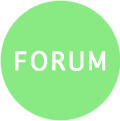
<style>
.page{position:relative;width:120px;height:121px;background:#89e982}
.page>*{position:absolute;margin:0}
.t1{font:24px "Thonburi";letter-spacing:0.1em;color:#fdfefd;font-weight:bold}
</style>
<div class="page">
<p class="t1" style="left:15px;top:50px;width:91px;height:21px">FORUM</p>
</div>
